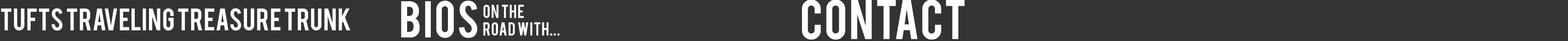
<style>
.page{position:relative;width:1568px;height:41px;background:#333333}
.page>*{position:absolute;margin:0}
.t1{font:40.8px "Bebas";letter-spacing:0.02em;color:#ffffff}
.t2{font:14.7px "Bebas";letter-spacing:0.02em;color:#ffffff}
.t3{font:44.1px "Bebas";letter-spacing:0.02em;color:#ffffff}
.t4{font:24.5px "Bebas";color:#ffffff}
</style>
<div class="page">
<p class="t1" style="left:401px;top:0px;width:76px;height:38px">Bios</p>
<p class="t2" style="left:483px;top:4px;width:76px;height:32px">On The <br>Road With...</p>
<p class="t3" style="left:802px;top:0px;width:163px;height:40px">Contact</p>
<p class="t4" style="left:1px;top:8px;width:349px;height:23px">Tufts Traveling Treasure Trunk</p>
</div>
